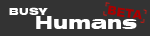
<style>
.page{position:relative;width:150px;height:36px;background:#333333}
.page>*{position:absolute;margin:0}
.t1{font:12px "Arial-Black";color:#a90000}
.t2{font:10px "Swiss721BT-BlackExtended";color:#ffffff}
.t3{font:18px "Swiss721BT-BlackExtended";color:#ffffff}
</style>
<div class="page">
<p class="t1" style="left:107px;top:5px;width:35px;height:15px;rotate:8deg">BETA</p>
<p class="t2" style="left:9px;top:7px;width:39px;height:8px">BUSY</p>
<p class="t3" style="left:36px;top:16px;width:101px;height:13px">Humans</p>
</div>
